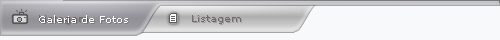
<style>
.page{position:relative;width:500px;height:40px;background:#f7f9fa}
.page>*{position:absolute;margin:0}
.t1{font:10px "Verdana";color:#ffffff}
.t2{font:10px "Verdana";color:#746b6b}
</style>
<div class="page">
<p class="t1" style="left:39px;top:15px;width:89px;height:8px">Galeria de Fotos</p>
<p class="t2" style="left:192px;top:15px;width:49px;height:9px">Listagem</p>
</div>
